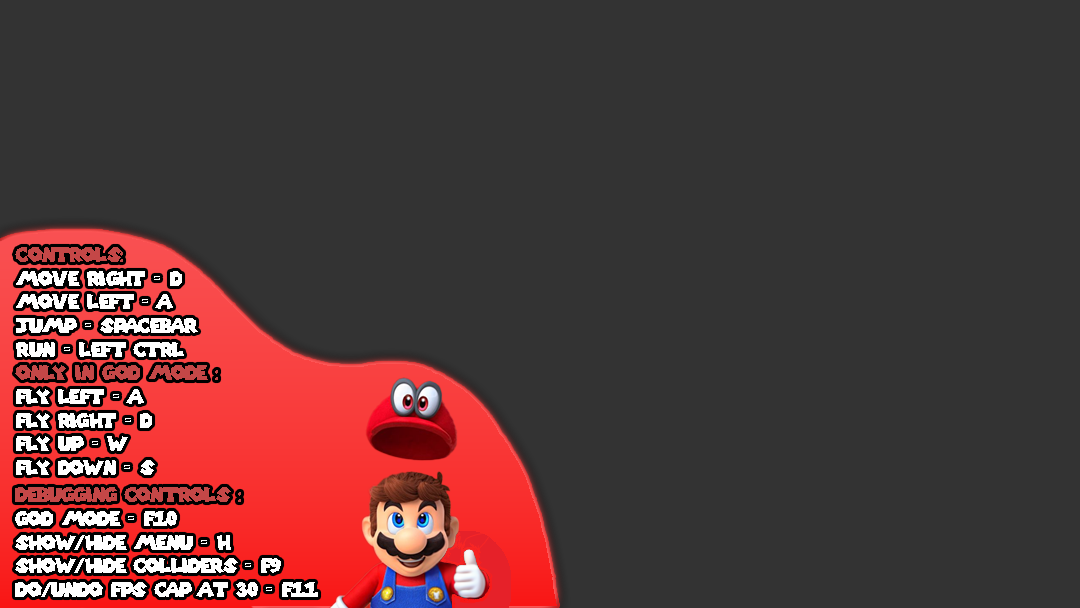
<style>
.page{position:relative;width:1080px;height:608px;background:#333333}
.page>*{position:absolute;margin:0}
.t1{font:19.7px "SuperMarioGalaxy";letter-spacing:-0.05em;color:#ffffff}
.t2{font:19.7px "SuperMarioGalaxy";letter-spacing:-0.05em;color:#c44747}
</style>
<div class="page">
<p class="t1" style="left:15px;top:247px;width:203px;height:228px"><span class="t2">controls:<br></span>move right = d<br>move left = a<br>jump = spacebar<br>run = left ctrl<br><span class="t2">only in god mode :<br></span>fly left = a<br>fly right = d<br>fly up = w<br>fly down = s</p>
<p class="t1" style="left:15px;top:487px;width:303px;height:110px"><span class="t2">debugging controls :<br></span>god mode = f10<br>show/hide menu = h<br>show/hide colliders = f9<br>do/undo fps cap at 30 = f11</p>
</div>
